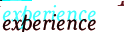
<style>
.page{position:relative;width:124px;height:32px;background:#ffffff}
.page>*{position:absolute;margin:0}
.t1{font:30px "MrsEavesItalic";color:#3fffff}
</style>
<div class="page">
<p class="t1" style="left:2px;top:5px;width:94px;height:24px">experience</p>
</div>
